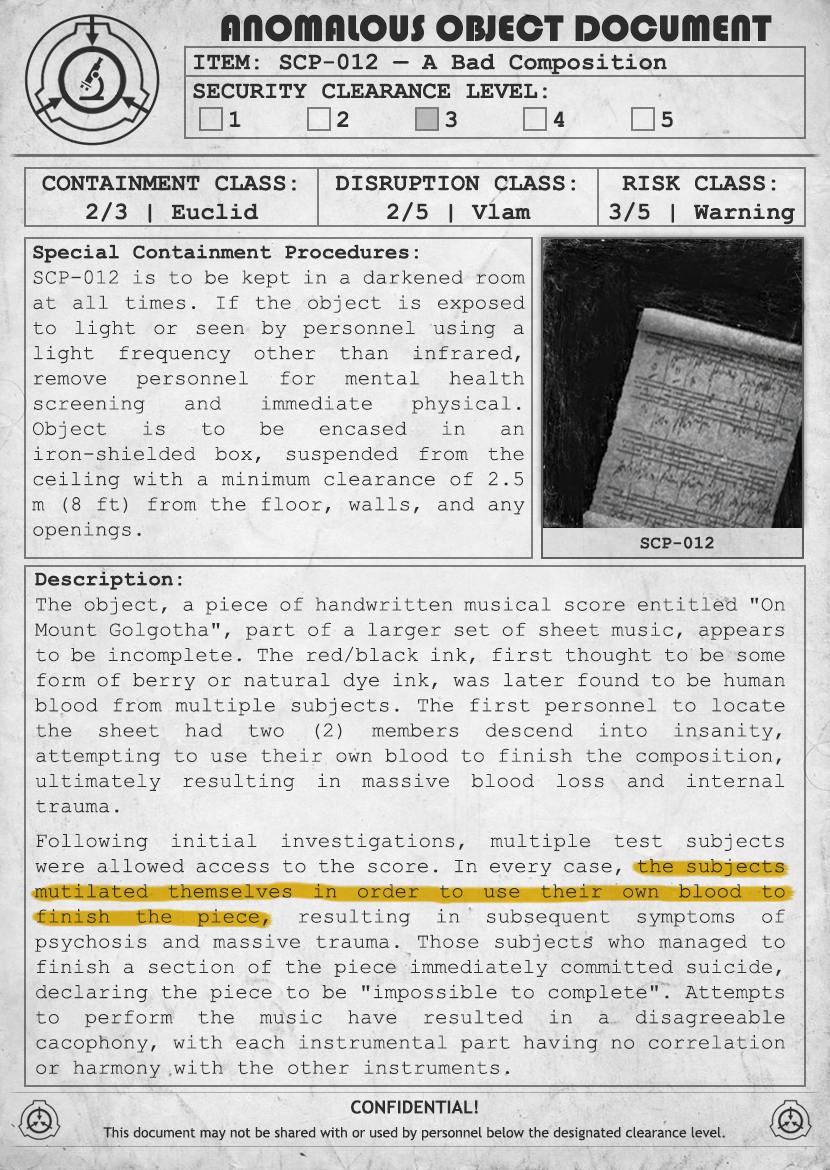
<style>
.page{position:relative;width:830px;height:1170px}
.page>*{position:absolute;margin:0}
.t1{font:38px "Bauhaus93";color:#333333;text-transform:uppercase}
.t2{font:24px "CourierNewPS-BoldMT";color:#333333}
.t3{font:24px "CourierNewPS-BoldMT";color:#333333;text-transform:uppercase}
.t4{font:21px "CourierNewPSMT";color:#333333}
.t5{font:21px "CourierNewPS-BoldMT";color:#333333}
.t6{font:18px "CourierNewPS-BoldMT";color:#333333}
.t7{font:14px/24px "TrebuchetMS";color:#333333}
.t8{font:18px/24px "TrebuchetMS-Bold";color:#333333}
</style>
<div class="page">
<p class="t1" style="left:221px;top:14px;width:551px;height:28px">anomalous object document</p>
<p class="t2" style="left:193px;top:53px;width:480px;height:75px">ITEM: SCP-012 — A Bad Composition<br><span class="t3">Security CLEARANCE LEVEL:</span> <br> 1   2   3   4   5</p>
<p class="t2" style="left:42px;top:175px;width:254px;height:48px;text-align:center">CONTAINMENT CLASS:<br>2/3 | Euclid</p>
<p class="t2" style="left:335px;top:175px;width:241px;height:48px;text-align:center">DISRUPTION CLASS:<br>2/5 | Vlam</p>
<p class="t2" style="left:609px;top:175px;width:186px;height:50px;text-align:center">RISK CLASS:<br>3/5 | Warning</p>
<p class="t4" style="left:32px;top:244px;width:493px;height:296px;text-align:justify"><span class="t5">Special Containment Procedures:<br></span>SCP-012 is to be kept in a darkened room at all times. If the object is exposed to light or seen by personnel using a light frequency other than infrared, remove personnel for mental health screening and immediate physical. Object is to be encased in an iron-shielded box, suspended from the ceiling with a minimum clearance of 2.5 m (8 ft) from the floor, walls, and any openings.</p>
<p class="t6" style="left:640px;top:536px;width:74px;height:13px">SCP-012</p>
<p class="t4" style="left:35px;top:571px;width:750px;height:242px;text-align:justify"><span class="t5">Description:<br></span>The object, a piece of handwritten musical score entitled "On Mount Golgotha", part of a larger set of sheet music, appears to be incomplete. The red/black ink, first thought to be some form of berry or natural dye ink, was later found to be human blood from multiple subjects. The first personnel to locate the sheet had two (2) members descend into insanity, attempting to use their own blood to finish the composition, ultimately resulting in massive blood loss and internal trauma.</p>
<p class="t4" style="left:35px;top:833px;width:750px;height:245px;text-align:justify">Following initial investigations, multiple test subjects were allowed access to the score. In every case, the subjects mutilated themselves in order to use their own blood to finish the piece, resulting in subsequent symptoms of psychosis and massive trauma. Those subjects who managed to finish a section of the piece immediately committed suicide, declaring the piece to be "impossible to complete". Attempts to perform the music have resulted in a disagreeable cacophony, with each instrumental part having no correlation or harmony with the other instruments.</p>
<p class="t7" style="left:103px;top:1100px;width:622px;height:41px;text-align:center"><span class="t8">CONFIDENTIAL!<br></span>This document may not be shared with or used by personnel below the designated clearance level.</p>
</div>
